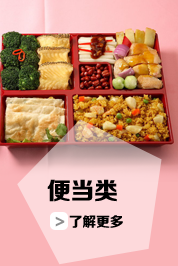
<style>
.page{position:relative;width:178px;height:266px}
.page>*{position:absolute;margin:0}
.t1{font:14px/36px "FZZDHJW--GB1-0";color:#000000}
.t2{font:24px/36px "FZZDHJW--GB1-0";color:#000000}
.t3{font:14px/36px "FZZDHJW--GB1-0";color:#8e8e8e}
</style>
<div class="page">
<p class="t1" style="left:47px;top:179px;width:76px;height:49px"><span class="t2">便当类<br>  </span><span class="t3">&gt;</span> 了解更多</p>
</div>
